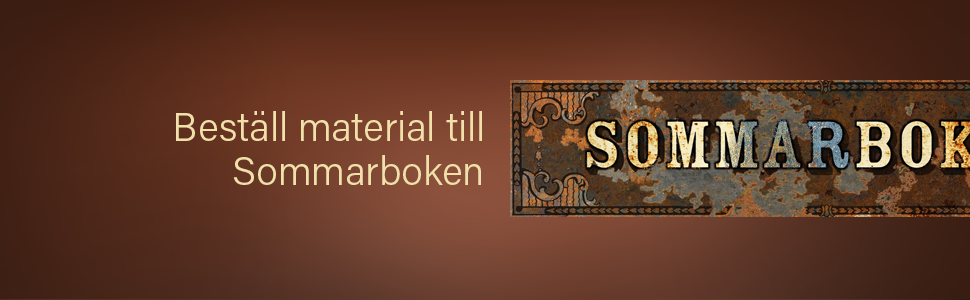
<style>
.page{position:relative;width:970px;height:300px}
.page>*{position:absolute;margin:0}
.t1{font:40px/44px "AcuminPro-Light";color:#f1e0aa}
</style>
<div class="page">
<p class="t1" style="left:176px;top:111px;width:306px;height:74px;text-align:right">Beställ material till<br>Sommarboken</p>
</div>
